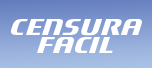
<style>
.page{position:relative;width:152px;height:68px}
.page>*{position:absolute;margin:0}
.t1{font:36px/18px "Motorwerk";color:#ffffff}
</style>
<div class="page">
<p class="t1" style="left:11px;top:19px;width:131px;height:34px;text-align:center">CENSURA<br>fACIL</p>
</div>
